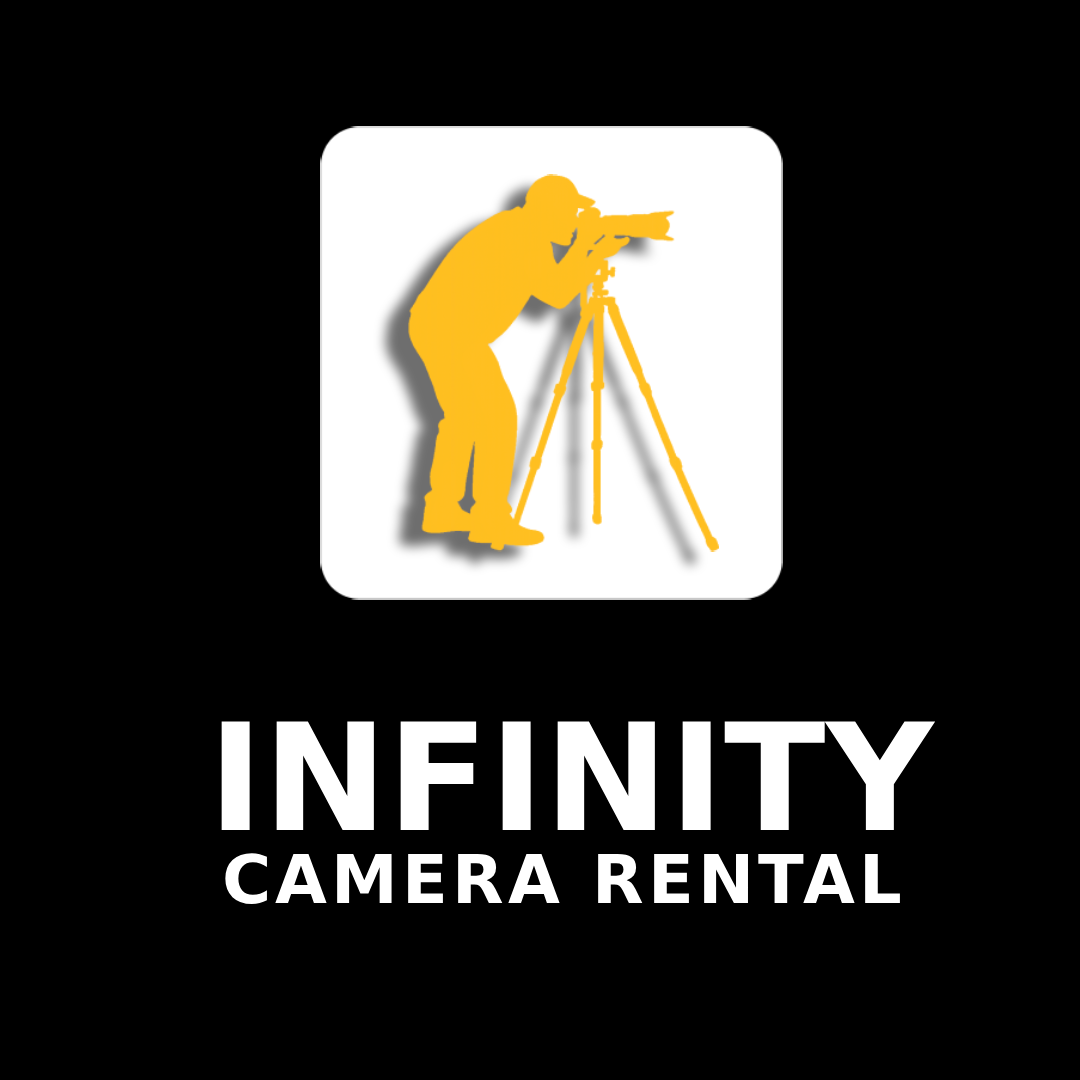
<style>
.page{position:relative;width:1080px;height:1080px;background:#000000}
.page>*{position:absolute;margin:0}
.t1{font:148.8px "DejaVuSans-Bold";color:#ffffff}
.t2{font:67.1px "DejaVuSans-Bold";letter-spacing:0.063em;color:#ffffff}
</style>
<div class="page">
<p class="t1" style="left:221px;top:721px;width:714px;height:109px">INFINITY</p>
<p class="t2" style="left:225px;top:853px;width:675px;height:51px">CAMERA RENTAL</p>
</div>
